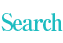
<style>
.page{position:relative;width:63px;height:43px;background:#ffffff}
.page>*{position:absolute;margin:0}
.t1{font:24px "RyuminPro-ExBold";letter-spacing:-0.08em;color:#1dbcc0;scale:0.9 1}
</style>
<div class="page">
<p class="t1" style="left:1px;top:13px;width:62px;height:18px">Search</p>
</div>
